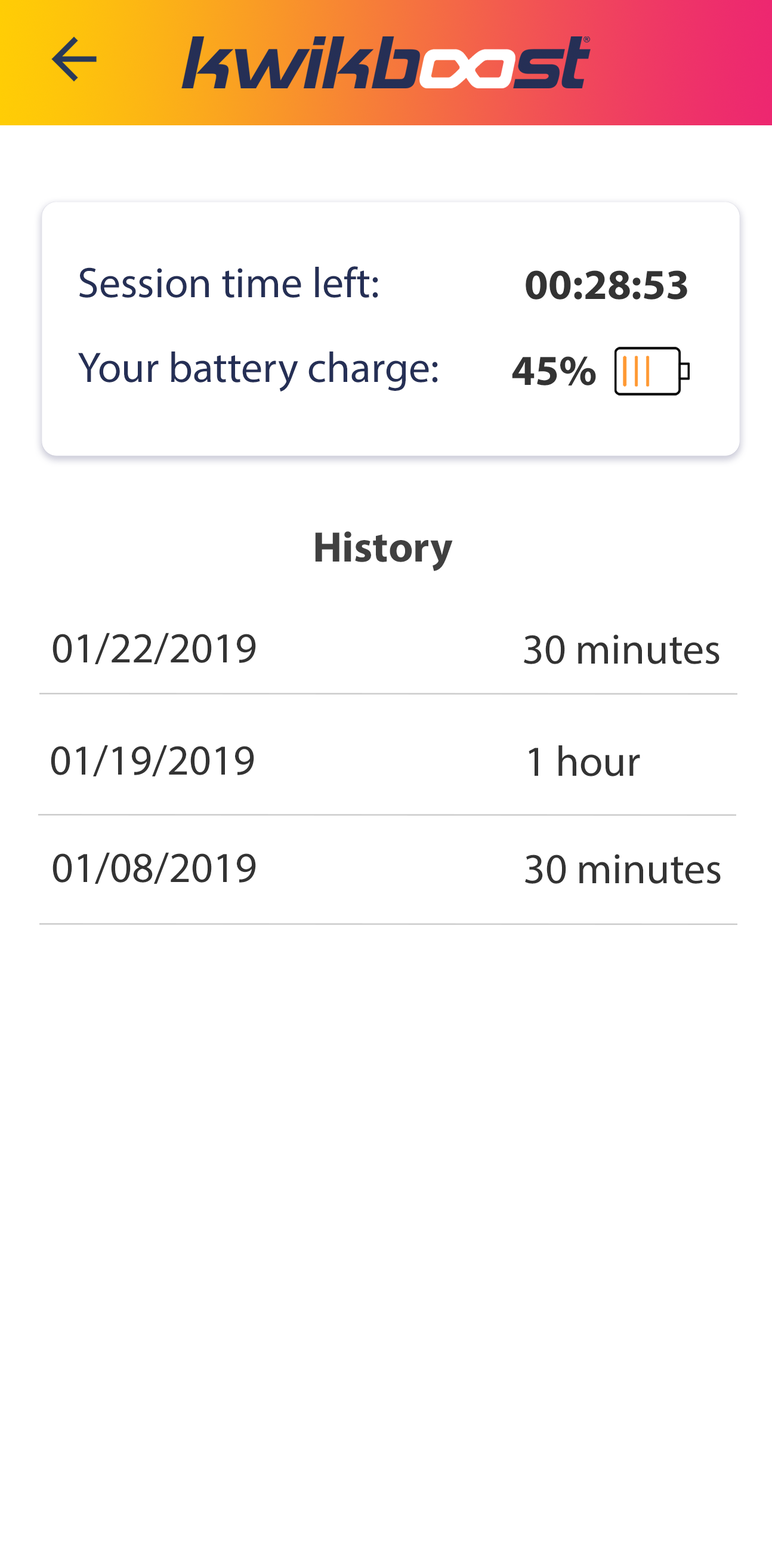
<style>
.page{position:relative;width:772px;height:1545px;background:#ffffff}
.page>*{position:absolute;margin:0}
.t1{font:43px "MyriadPro-Regular";color:#252f55}
.t2{font:43px "MyriadPro-Bold";color:#333333}
.t3{font:43px "MyriadPro-Bold";color:#404040}
.t4{font:43px "MyriadPro-Regular";color:#333333}
</style>
<div class="page">
<p class="t1" style="left:79px;top:266px;width:299px;height:32px">Session time left:</p>
<p class="t2" style="left:526px;top:270px;width:161px;height:29px">00:28:53</p>
<p class="t1" style="left:78px;top:351px;width:360px;height:40px">Your battery charge:</p>
<p class="t2" style="left:512px;top:356px;width:84px;height:29px">45%</p>
<p class="t3" style="left:315px;top:531px;width:138px;height:40px">History</p>
<p class="t4" style="left:53px;top:632px;width:203px;height:32px">01/22/2019</p>
<p class="t4" style="left:524px;top:634px;width:196px;height:30px">30 minutes</p>
<p class="t4" style="left:51px;top:745px;width:203px;height:31px">01/19/2019</p>
<p class="t4" style="left:529px;top:745px;width:111px;height:31px">1 hour</p>
<p class="t4" style="left:53px;top:852px;width:203px;height:32px">01/08/2019</p>
<p class="t4" style="left:525px;top:854px;width:196px;height:30px">30 minutes</p>
</div>
